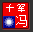
<style>
.page{position:relative;width:33px;height:32px;background:#f20000}
.page>*{position:absolute;margin:0}
.t1{font:10.4px "SimSun";color:#ffffff}
.t2{font:11.7px "SimSun";color:#ffffff}
</style>
<div class="page">
<p class="t1" style="left:6px;top:4px;width:19px;height:8px">十军</p>
<p class="t2" style="left:16px;top:15px;width:11px;height:12px">冯</p>
</div>
